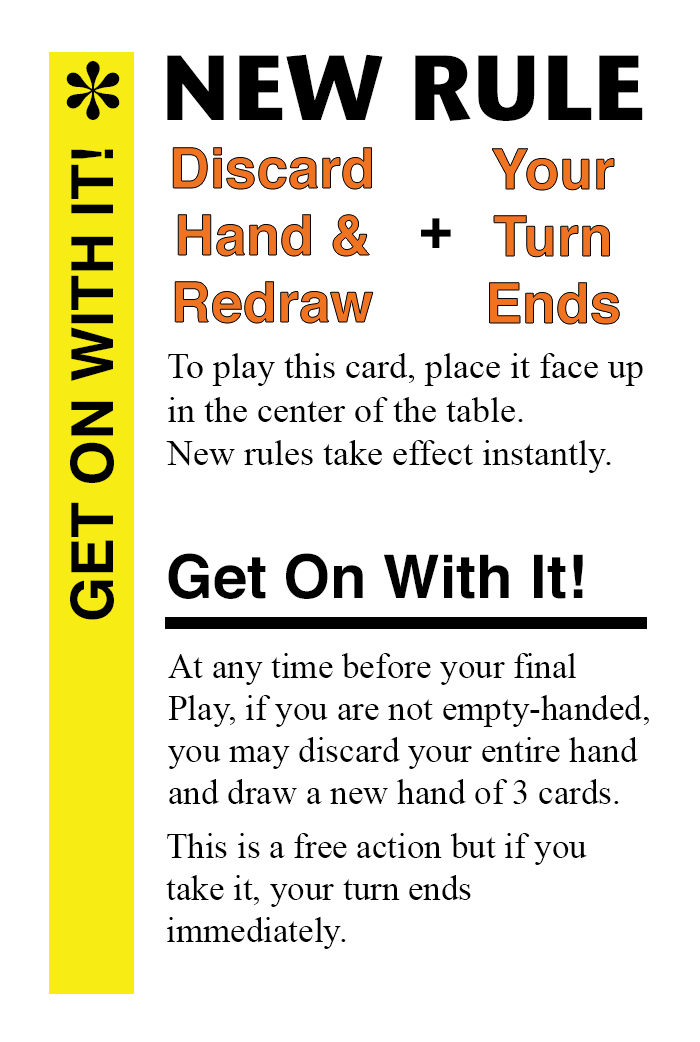
<style>
.page{position:relative;width:700px;height:1042px;background:#ffffff}
.page>*{position:absolute;margin:0}
.t1{font:92px "StoneSansITC-Bold";color:#000000}
.t2{font:82px "MS-Gothic";color:#000000}
.t3{font:58px "Helvetica-Bold";color:#000000}
.t4{font:56px "Helvetica-Bold";color:#f07322}
.t5{font:56px "Helvetica-Bold";color:#000000}
.t6{font:36px "TimesNewRomanPSMT";color:#000000}
.t7{font:60px "Helvetica-Bold";color:#000000}
.t8{font:35px "TimesNewRomanPSMT";color:#000000}
</style>
<div class="page">
<p class="t1" style="left:167px;top:54px;width:476px;height:67px">NEW RULE</p>
<p class="t2" style="left:66px;top:61px;width:54px;height:59px">✽</p>
<p class="t3" style="left:70px;top:149px;width:44px;height:471px;rotate:-90deg">GET ON WITH IT!</p>
<p class="t4" style="left:173px;top:147px;width:200px;height:176px;text-align:center">Discard<br>Hand &amp;<br>Redraw</p>
<p class="t4" style="left:489px;top:148px;width:131px;height:176px;text-align:center">Your<br>Turn<br>Ends</p>
<p class="t5" style="left:421px;top:218px;width:30px;height:30px">+</p>
<p class="t6" style="left:166px;top:353px;width:477px;height:120px">To play this card, place it face up<br>in the center of the table. <br>New rules take effect instantly.</p>
<p class="t7" style="left:168px;top:553px;width:415px;height:46px">Get On With It!</p>
<p class="t8" style="left:168px;top:653px;width:481px;height:151px">At any time before your final <br>Play, if you are not empty-handed, <br>you may discard your entire hand<br>and draw a new hand of 3 cards.</p>
<p class="t8" style="left:166px;top:833px;width:421px;height:116px">This is a free action but if you<br>take it, your turn ends <br>immediately.</p>
</div>
